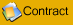
<style>
.page{position:relative;width:73px;height:25px;background:#e7ae02}
.page>*{position:absolute;margin:0}
.t1{font:12px "MicrosoftSansSerif";color:#010101}
</style>
<div class="page">
<p class="t1" style="left:23px;top:6px;width:46px;height:10px">Contract</p>
</div>
